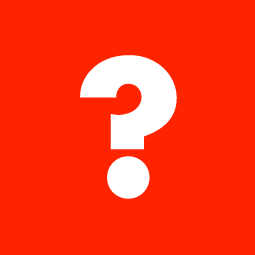
<style>
.page{position:relative;width:255px;height:255px;background:#ff2400}
.page>*{position:absolute;margin:0}
.t1{font:180px "Futura-Bold";letter-spacing:-0.075em;color:#ffffff}
</style>
<div class="page">
<p class="t1" style="left:80px;top:55px;width:97px;height:144px">?</p>
</div>
